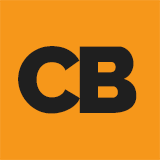
<style>
.page{position:relative;width:160px;height:160px;background:#f6971a}
.page>*{position:absolute;margin:0}
.t1{font:93.8px "Raleway-Black";letter-spacing:-0.07em;color:#1f1f1f}
</style>
<div class="page">
<p class="t1" style="left:18px;top:46px;width:119px;height:68px">CB</p>
</div>
